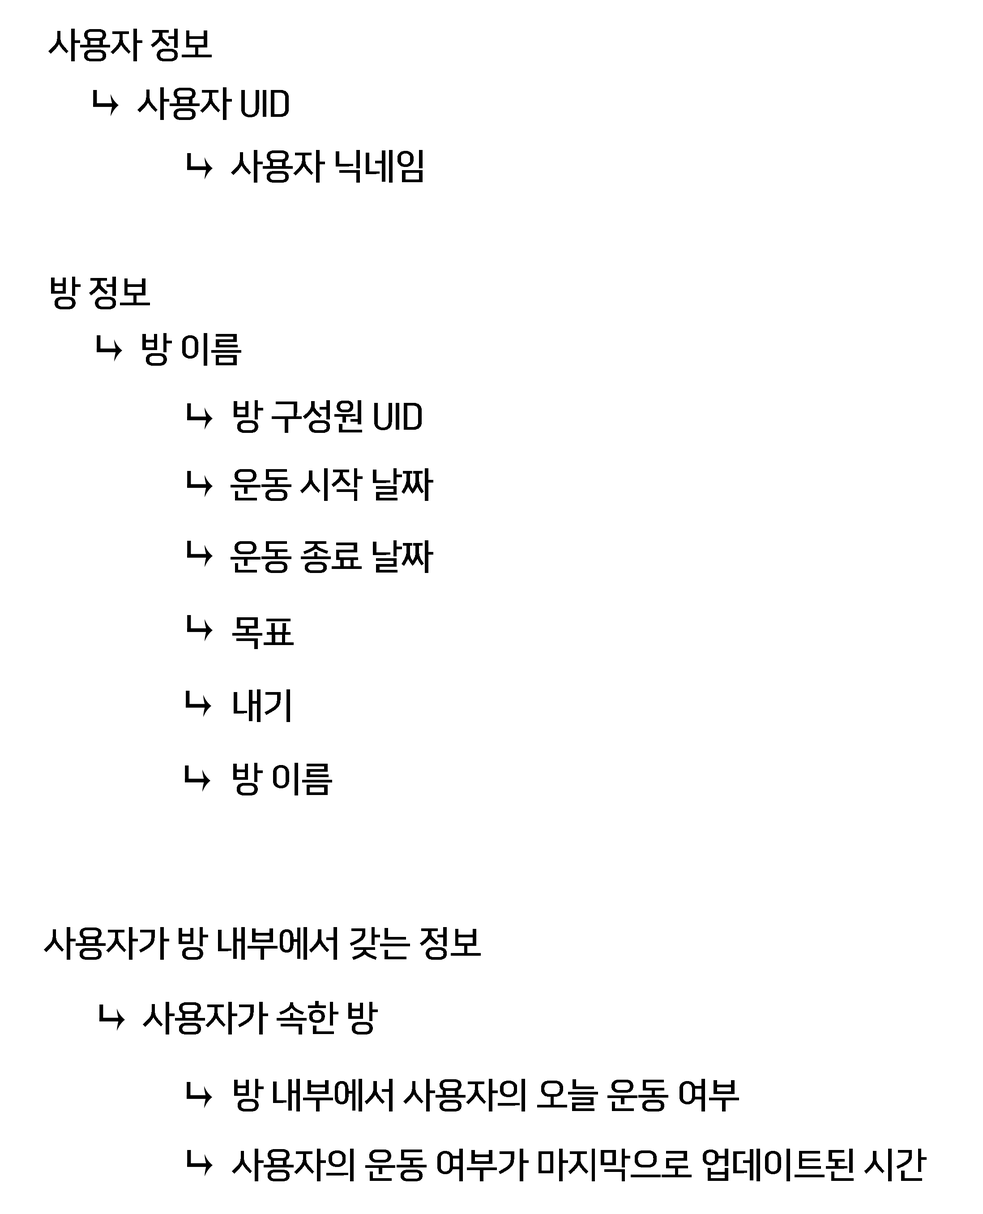
<style>
.page{position:relative;width:983px;height:1214px;background:#ffffff}
.page>*{position:absolute;margin:0}
.t1{font:35.8px "InfinitySans-Regular";letter-spacing:-0.04em;color:#000000}
</style>
<div class="page">
<p class="t1" style="left:48px;top:29px;width:164px;height:32px">사용자 정보</p>
<p class="t1" style="left:137px;top:87px;width:152px;height:33px">사용자 UID</p>
<p class="t1" style="left:231px;top:150px;width:191px;height:33px">사용자 닉네임</p>
<p class="t1" style="left:51px;top:277px;width:99px;height:32px">방 정보</p>
<p class="t1" style="left:142px;top:333px;width:99px;height:33px">방 이름</p>
<p class="t1" style="left:234px;top:400px;width:188px;height:33px">방 구성원 UID</p>
<p class="t1" style="left:230px;top:468px;width:203px;height:33px">운동 시작 날짜</p>
<p class="t1" style="left:230px;top:540px;width:203px;height:33px">운동 종료 날짜</p>
<p class="t1" style="left:232px;top:617px;width:62px;height:32px">목표</p>
<p class="t1" style="left:234px;top:689px;width:56px;height:33px">내기</p>
<p class="t1" style="left:233px;top:762px;width:99px;height:33px">방 이름</p>
<p class="t1" style="left:44px;top:927px;width:437px;height:32px">사용자가 방 내부에서 갖는 정보</p>
<p class="t1" style="left:143px;top:1001px;width:235px;height:33px">사용자가 속한 방</p>
<p class="t1" style="left:234px;top:1078px;width:505px;height:33px">방 내부에서 사용자의 오늘 운동 여부</p>
<p class="t1" style="left:232px;top:1148px;width:694px;height:33px">사용자의 운동 여부가 마지막으로 업데이트된 시간</p>
</div>
